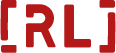
<style>
.page{position:relative;width:116px;height:53px;background:#ffffff}
.page>*{position:absolute;margin:0}
.t1{font:60px "LEIXO-Bold";color:#b41919}
</style>
<div class="page">
<p class="t1" style="left:0px;top:0px;width:116px;height:53px">[RL]</p>
</div>
